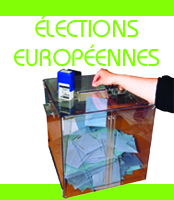
<style>
.page{position:relative;width:174px;height:200px;background:#ffffff}
.page>*{position:absolute;margin:0}
.t1{font:24px "DynameSSK";color:#82ff07}
</style>
<div class="page">
<p class="t1" style="left:14px;top:15px;width:146px;height:52px;text-align:center">ÉLECTIONS<br>EUROPÉENNES</p>
</div>
